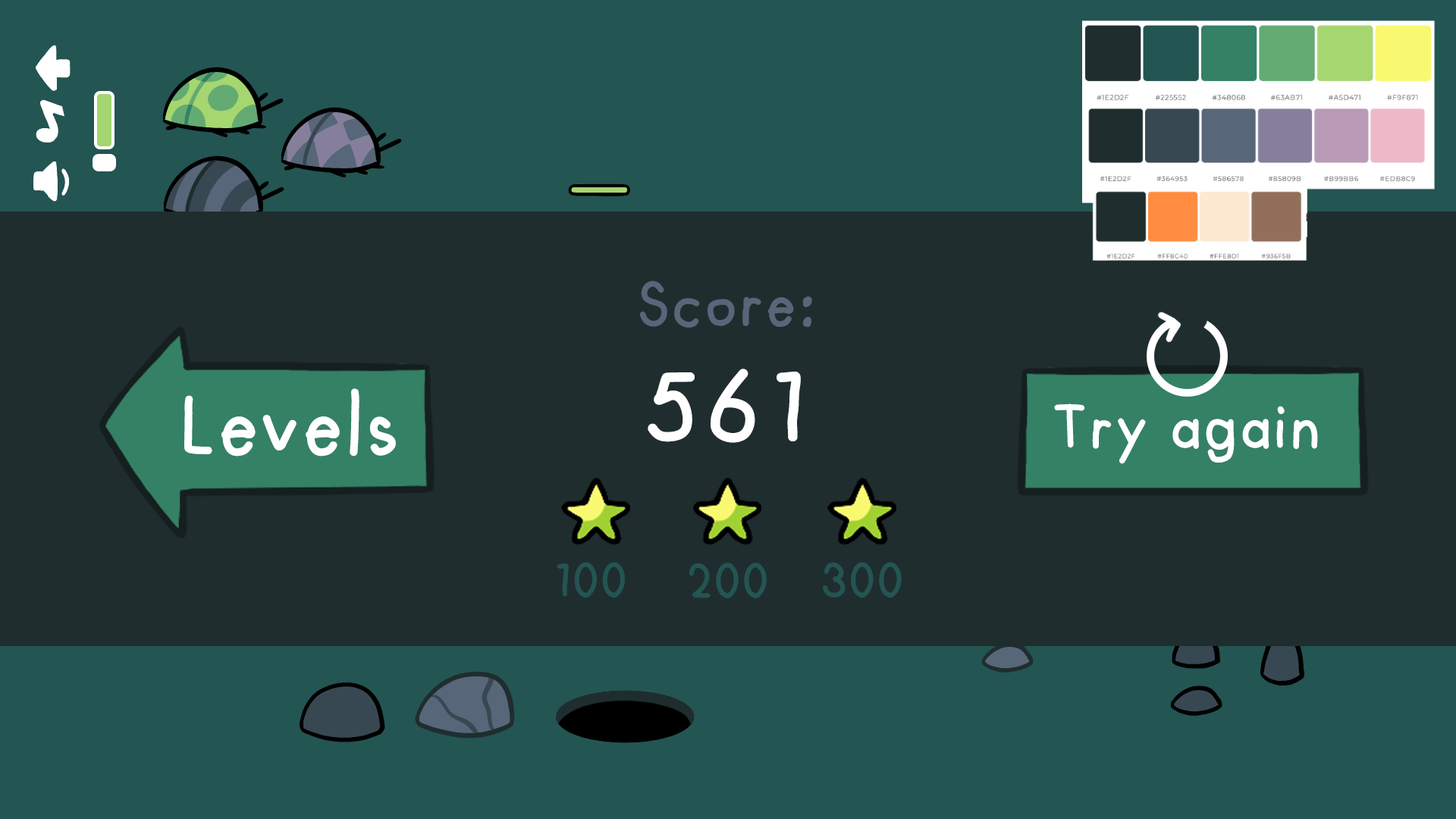
<style>
.page{position:relative;width:1456px;height:819px;background:#1f2d2f}
.page>*{position:absolute;margin:0}
.t1{font:56.9px "FuturaHandwritten";color:#576678;font-weight:bold}
.t2{font:94.8px "FuturaHandwritten";color:#ffffff;font-weight:bold}
.t3{font:75.8px "FuturaHandwritten";color:#ffffff;font-weight:bold}
.t4{font:56.9px "FuturaHandwritten";color:#ffffff;font-weight:bold}
.t5{font:44.5px "FuturaHandwritten";color:#235552;font-weight:bold}
.t6{font:44.5px/118.6px "FuturaHandwritten";color:#235552;font-weight:bold}
</style>
<div class="page">
<p class="t1" style="left:639px;top:281px;width:173px;height:47px">Score:</p>
<p class="t2" style="left:648px;top:369px;width:153px;height:74px">561</p>
<p class="t3" style="left:184px;top:388px;width:212px;height:69px">Levels</p>
<p class="t4" style="left:1054px;top:403px;width:264px;height:61px">Try again</p>
<p class="t5" style="left:557px;top:562px;width:68px;height:36px">100</p>
<p class="t6" style="left:689px;top:563px;width:78px;height:35px;text-align:center">200<br>00<br>00</p>
<p class="t5" style="left:823px;top:562px;width:79px;height:36px">300</p>
</div>
